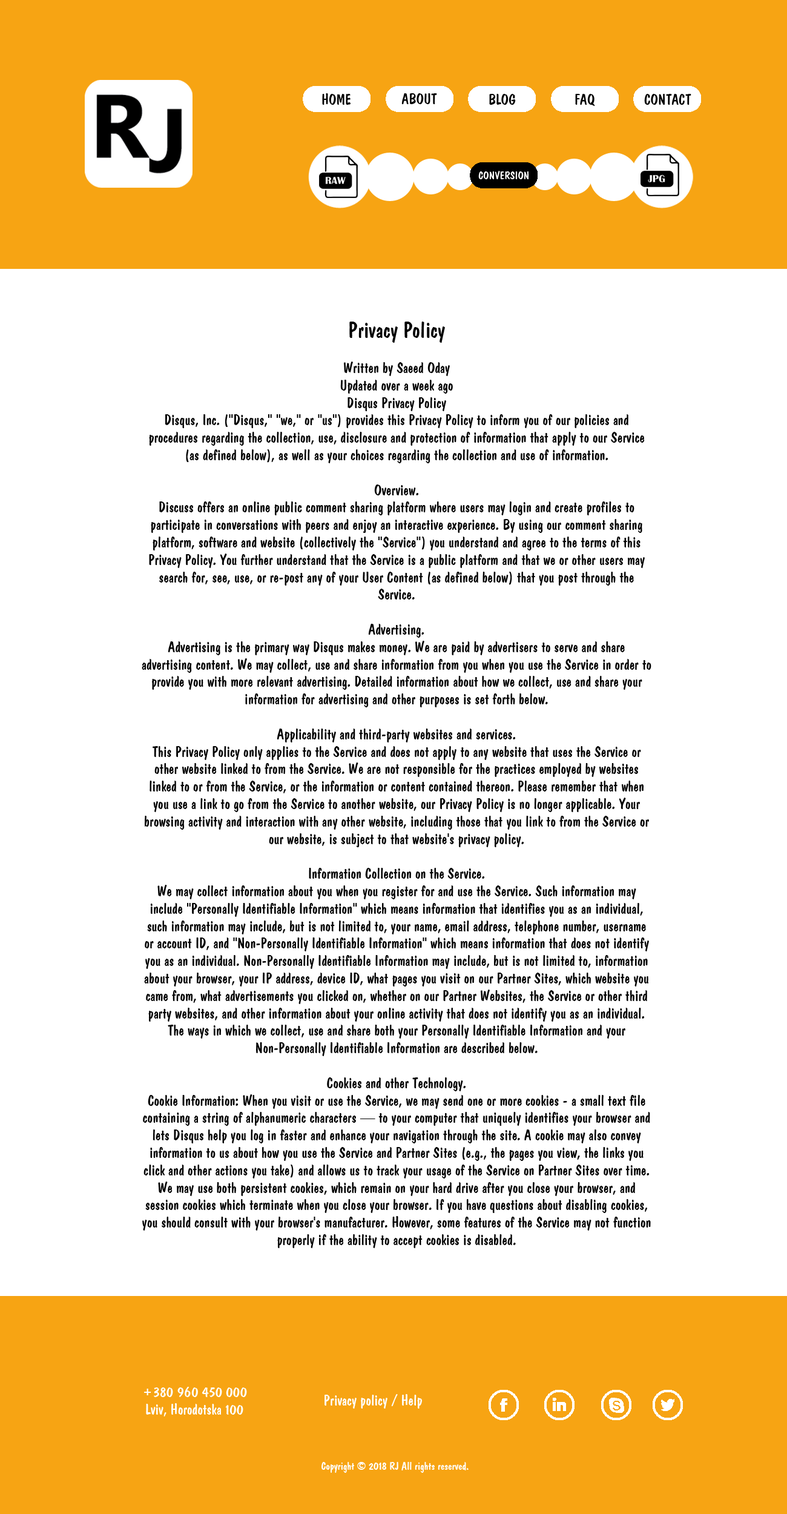
<style>
.page{position:relative;width:787px;height:1514px;background:#ffffff}
.page>*{position:absolute;margin:0}
.t1{font:14.5px "ADomIno";color:#000000}
.t2{font:10.9px "ADomIno";color:#ffffff}
.t3{font:21.8px "ADomIno";color:#000000}
.t4{font:14.5px "ADomIno";color:#ffffff}
</style>
<div class="page">
<p class="t1" style="left:322px;top:93px;width:29px;height:12px">HOME</p>
<p class="t1" style="left:402px;top:93px;width:35px;height:11px">ABOUT</p>
<p class="t1" style="left:489px;top:94px;width:27px;height:11px">BLOG</p>
<p class="t1" style="left:575px;top:94px;width:20px;height:12px">FAQ</p>
<p class="t1" style="left:644px;top:94px;width:48px;height:11px">CONTACT</p>
<p class="t2" style="left:479px;top:171px;width:50px;height:8px">CONVERSION</p>
<p class="t1" style="left:142px;top:322px;width:510px;height:926px;text-align:center"><span class="t3">Privacy Policy<br></span><br>Written by Saeed Oday <br>Updated over a week ago<br>Disqus Privacy Policy<br>Disqus, Inc. ("Disqus," "we," or "us") provides this Privacy Policy to inform you of our policies and procedures regarding the collection, use, disclosure and protection of information that apply to our Service (as defined below), as well as your choices regarding the collection and use of information.<br><br>Overview.<br>Discuss offers an online public comment sharing platform where users may login and create profiles to participate in conversations with peers and enjoy an interactive experience. By using our comment sharing platform, software and website (collectively the "Service") you understand and agree to the terms of this Privacy Policy. You further understand that the Service is a public platform and that we or other users may search for, see, use, or re-post any of your User Content (as defined below) that you post through the Service.<br><br>Advertising.<br>Advertising is the primary way Disqus makes money. We are paid by advertisers to serve and share advertising content. We may collect, use and share information from you when you use the Service in order to provide you with more relevant advertising. Detailed information about how we collect, use and share your information for advertising and other purposes is set forth below.<br><br>Applicability and third-party websites and services.<br>This Privacy Policy only applies to the Service and does not apply to any website that uses the Service or other website linked to from the Service. We are not responsible for the practices employed by websites linked to or from the Service, or the information or content contained thereon. Please remember that when you use a link to go from the Service to another website, our Privacy Policy is no longer applicable. Your browsing activity and interaction with any other website, including those that you link to from the Service or our website, is subject to that website's privacy policy.<br><br>Information Collection on the Service.<br>We may collect information about you when you register for and use the Service. Such information may include "Personally Identifiable Information" which means information that identifies you as an individual, such information may include, but is not limited to, your name, email address, telephone number, username or account ID, and "Non-Personally Identifiable Information" which means information that does not identify you as an individual. Non-Personally Identifiable Information may include, but is not limited to, information about your browser, your IP address, device ID, what pages you visit on our Partner Sites, which website you came from, what advertisements you clicked on, whether on our Partner Websites, the Service or other third party websites, and other information about your online activity that does not identify you as an individual. The ways in which we collect, use and share both your Personally Identifiable Information and your Non-Personally Identifiable Information are described below.<br><br>Cookies and other Technology.<br>Cookie Information: When you visit or use the Service, we may send one or more cookies - a small text file containing a string of alphanumeric characters — to your computer that uniquely identifies your browser and lets Disqus help you log in faster and enhance your navigation through the site. A cookie may also convey information to us about how you use the Service and Partner Sites (e.g., the pages you view, the links you click and other actions you take) and allows us to track your usage of the Service on Partner Sites over time. We may use both persistent cookies, which remain on your hard drive after you close your browser, and session cookies which terminate when you close your browser. If you have questions about disabling cookies, you should consult with your browser's manufacturer. However, some features of the Service may not function properly if the ability to accept cookies is disabled.</p>
<p class="t4" style="left:144px;top:1387px;width:103px;height:30px;text-align:center">+380 960 450 000<br>Lviv, Horodotska 100</p>
<p class="t4" style="left:325px;top:1394px;width:97px;height:15px">Privacy policy / Help</p>
<p class="t2" style="left:322px;top:1462px;width:147px;height:11px">Copyright © 2018 RJ All rights reserved.</p>
</div>
